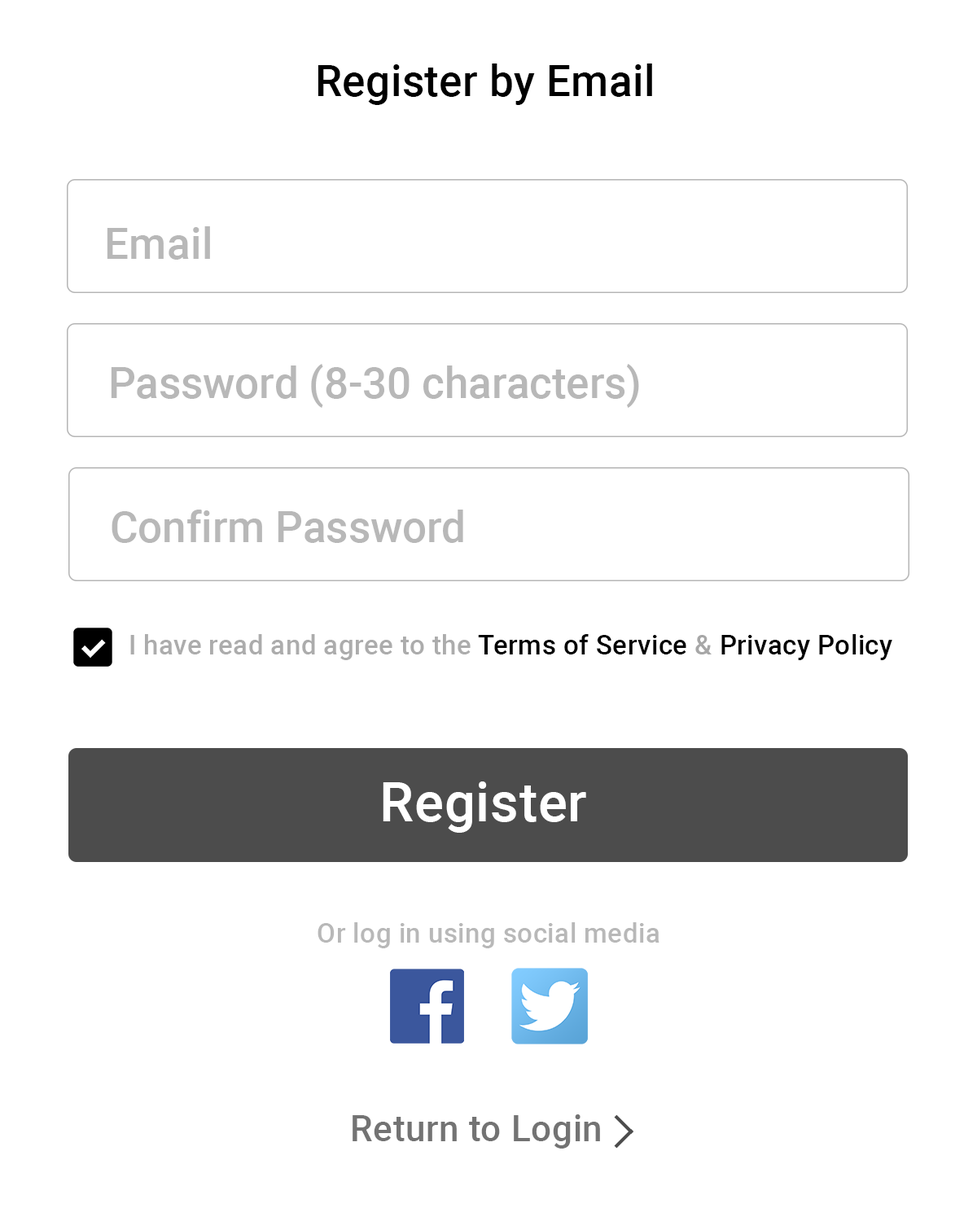
<style>
.page{position:relative;width:977px;height:1221px;background:#ffffff}
.page>*{position:absolute;margin:0}
.t1{font:43px "Roboto-Medium";letter-spacing:0.01em;color:#000000}
.t2{font:43px "Roboto-Medium";letter-spacing:0.01em;color:#b8b8b8}
.t3{font:43px "Roboto-Medium";color:#b8b8b8}
.t4{font:27.1px "Roboto-Medium";letter-spacing:0.01em;color:#acacac}
.t5{font:27.1px "Roboto-Medium";letter-spacing:0.01em;color:#000000}
.t6{font:27.1px "Roboto-Medium";letter-spacing:0.01em;color:#a7a7a7}
.t7{font:54.7px "Roboto-Medium";letter-spacing:0.01em;color:#ffffff}
.t8{font:27.1px "Roboto-Medium";letter-spacing:0.01em;color:#b8b8b8}
.t9{font:36.2px "Roboto-Medium";letter-spacing:0.01em;color:#737373}
</style>
<div class="page">
<p class="t1" style="left:317px;top:63px;width:335px;height:42px">Register by Email</p>
<p class="t2" style="left:107px;top:226px;width:103px;height:34px">Email</p>
<p class="t3" style="left:111px;top:364px;width:528px;height:44px">Password (8-30 characters)</p>
<p class="t3" style="left:112px;top:510px;width:351px;height:33px">Confirm Password</p>
<p class="t4" style="left:130px;top:634px;width:762px;height:26px">I have read and agree to the<span class="t5"> Terms of Service </span><span class="t6">&amp;</span><span class="t5"> Privacy Policy</span></p>
<p class="t7" style="left:383px;top:781px;width:203px;height:52px">Register</p>
<p class="t8" style="left:317px;top:922px;width:342px;height:26px">Or log in using social media</p>
<p class="t9" style="left:352px;top:1114px;width:248px;height:34px">Return to Login</p>
</div>
